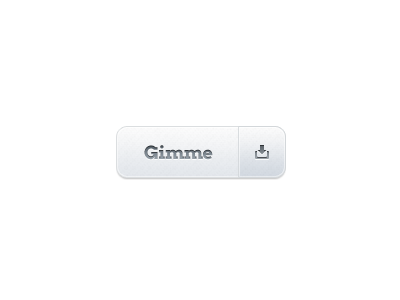
<style>
.page{position:relative;width:400px;height:300px;background:#ffffff}
.page>*{position:absolute;margin:0}
.t1{font:18px "Arvo-Bold";letter-spacing:0.05em}
</style>
<div class="page">
<p class="t1" style="left:144px;top:145px;width:69px;height:15px">Gimme</p>
</div>
